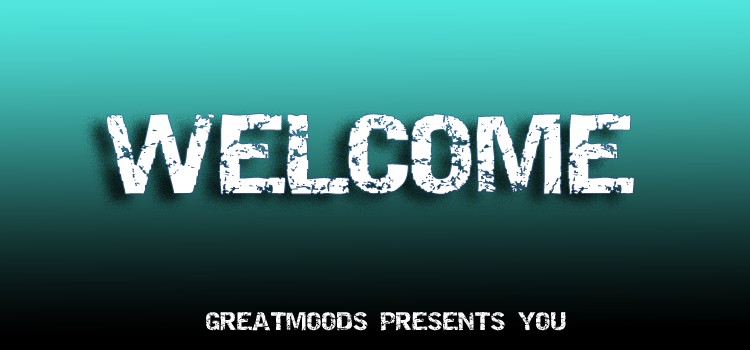
<style>
.page{position:relative;width:750px;height:350px}
.page>*{position:absolute;margin:0}
.t1{font:79px "Destroy";color:#ffffff}
.t2{font:18px "Destroy";color:#ffffff}
</style>
<div class="page">
<p class="t1" style="left:107px;top:113px;width:527px;height:81px">WELCOME</p>
<p class="t2" style="left:205px;top:312px;width:361px;height:19px">GREATMOODS PRESENTS YOU</p>
</div>
